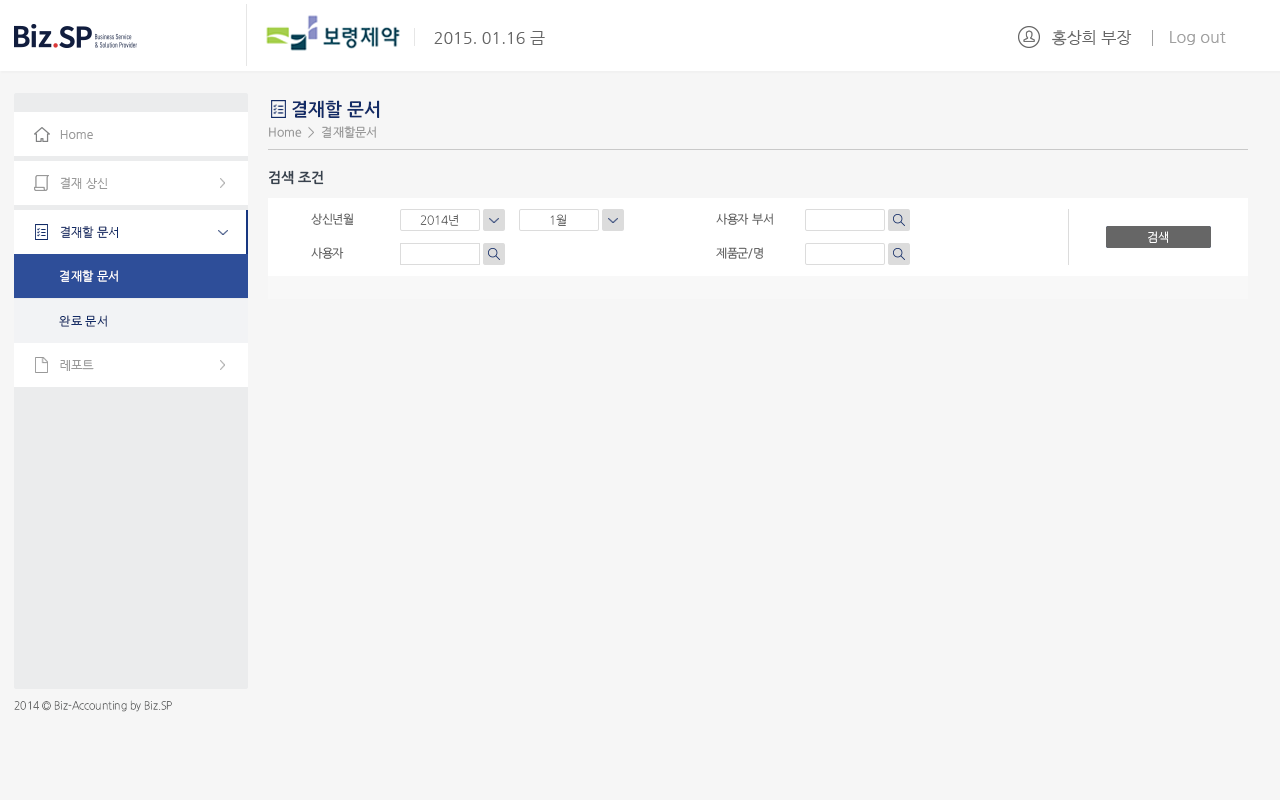
<style>
.page{position:relative;width:1280px;height:800px;background:#f6f6f6}
.page>*{position:absolute;margin:0}
.t1{font:16px "NanumGothic";color:#666666}
.t2{font:16px "NanumGothic";color:#a0a0a0}
.t3{font:18px "NanumGothicOTFBold";color:#122b66}
.t4{font:12px "NanumGothicOTF";color:#999999}
.t5{font:12px "NanumGothic";color:#999999}
.t6{font:14px "NanumGothicOTFBold";color:#38424e}
.t7{font:12px "NanumGothicOTF";letter-spacing:-0.025em;color:#666666}
.t8{font:12px "NanumGothicOTFLight";letter-spacing:-0.025em;color:#666666}
.t9{font:12px "NanumGothic";color:#122b66}
.t10{font:12px "NanumGothicOTFLight";letter-spacing:-0.025em;color:#ffffff}
.t11{font:12px "NanumGothicOTF";color:#ffffff}
.t12{font:12px "NanumGothicOTF";color:#122b66}
.t13{font:11px "NanumGothicOTFLight";color:#6c6d6d;scale:0.94 1}
</style>
<div class="page">
<p class="t1" style="left:1052px;top:30px;width:80px;height:16px">홍상희 부장</p>
<p class="t1" style="left:434px;top:31px;width:111px;height:14px">2015. 01.16 금</p>
<p class="t2" style="left:1170px;top:31px;width:56px;height:14px">Log out</p>
<p class="t3" style="left:292px;top:100px;width:88px;height:18px">결재할 문서</p>
<p class="t4" style="left:269px;top:126px;width:107px;height:12px">Home  &gt;  결재할문서</p>
<p class="t5" style="left:60px;top:130px;width:33px;height:9px">Home</p>
<p class="t6" style="left:269px;top:170px;width:55px;height:15px">검색 조건</p>
<p class="t5" style="left:60px;top:177px;width:48px;height:12px">결제 상신</p>
<p class="t5" style="left:60px;top:177px;width:48px;height:12px">결재 상신</p>
<p class="t7" style="left:311px;top:213px;width:42px;height:12px">상신년월</p>
<p class="t8" style="left:420px;top:214px;width:39px;height:12px">2014년</p>
<p class="t8" style="left:550px;top:214px;width:16px;height:12px">1월</p>
<p class="t7" style="left:716px;top:213px;width:57px;height:12px">사용자 부서</p>
<p class="t9" style="left:60px;top:226px;width:58px;height:12px">결재할 문서</p>
<p class="t10" style="left:1148px;top:231px;width:20px;height:12px">검색</p>
<p class="t10" style="left:1148px;top:231px;width:20px;height:12px">검색</p>
<p class="t7" style="left:311px;top:247px;width:33px;height:12px">사용자</p>
<p class="t7" style="left:716px;top:247px;width:47px;height:12px">제품군/명</p>
<p class="t11" style="left:60px;top:270px;width:58px;height:12px">결재할 문서</p>
<p class="t12" style="left:59px;top:315px;width:48px;height:12px">완료 문서</p>
<p class="t5" style="left:60px;top:360px;width:34px;height:11px">레포트</p>
<p class="t5" style="left:60px;top:360px;width:34px;height:11px">레포트</p>
<p class="t13" style="left:14px;top:700px;width:158px;height:12px">2014 © Biz-Accounting by Biz.SP</p>
</div>
